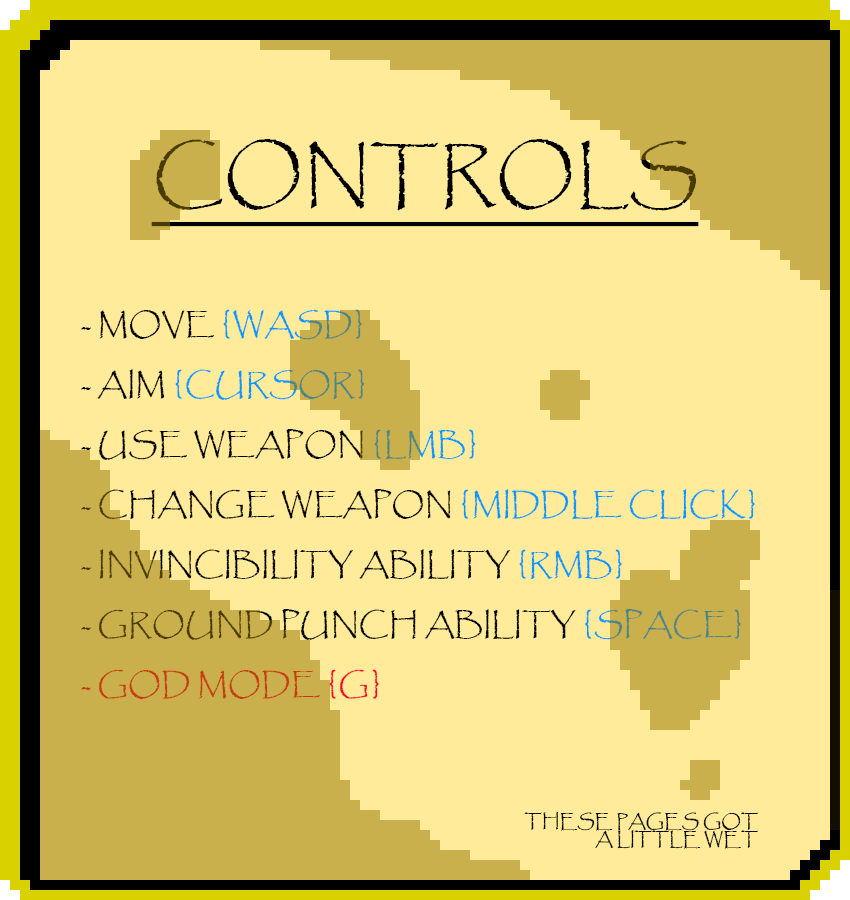
<style>
.page{position:relative;width:850px;height:900px;background:#ffeb99}
.page>*{position:absolute;margin:0}
.t1{font:72px "Papyrus-Regular";color:#000000;text-transform:uppercase;text-decoration:underline}
.t2{font:30px/60px "Papyrus-Regular";text-transform:uppercase}
.t3{font:18px/18px "Papyrus-Regular";color:#000000;text-transform:uppercase}
</style>
<div class="page">
<p class="t1" style="left:151px;top:139px;width:548px;height:88px">Controls</p>
<p class="t2" style="left:81px;top:309px;width:674px;height:390px">- Move {WASD}<br>- Aim {Cursor}<br>- Use Weapon {LMB}<br>- Change Weapon {Middle Click}<br>- Invincibility Ability {RMB}<br>- Ground Punch Ability {SPACE}<br>- God Mode {G}</p>
<p class="t3" style="left:524px;top:812px;width:235px;height:37px;text-align:right">These Pages Got<br>A Little Wet</p>
</div>
